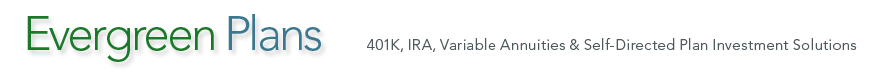
<style>
.page{position:relative;width:896px;height:83px;background:#ffffff}
.page>*{position:absolute;margin:0}
.t1{font:47.9px "Avenir-Light";letter-spacing:-0.06em;color:#1a7829}
.t2{font:47.9px "Avenir-Light";letter-spacing:-0.06em;color:#3b788f}
.t3{font:14.7px "Avenir-Light";letter-spacing:0.02em;color:#4f5a5e}
</style>
<div class="page">
<p class="t1" style="left:27px;top:14px;width:294px;height:48px">Evergreen <span class="t2">Plans</span></p>
<p class="t3" style="left:367px;top:38px;width:490px;height:14px">401K, IRA, Variable Annuities &amp; Self-Directed Plan Investment Solutions</p>
</div>
